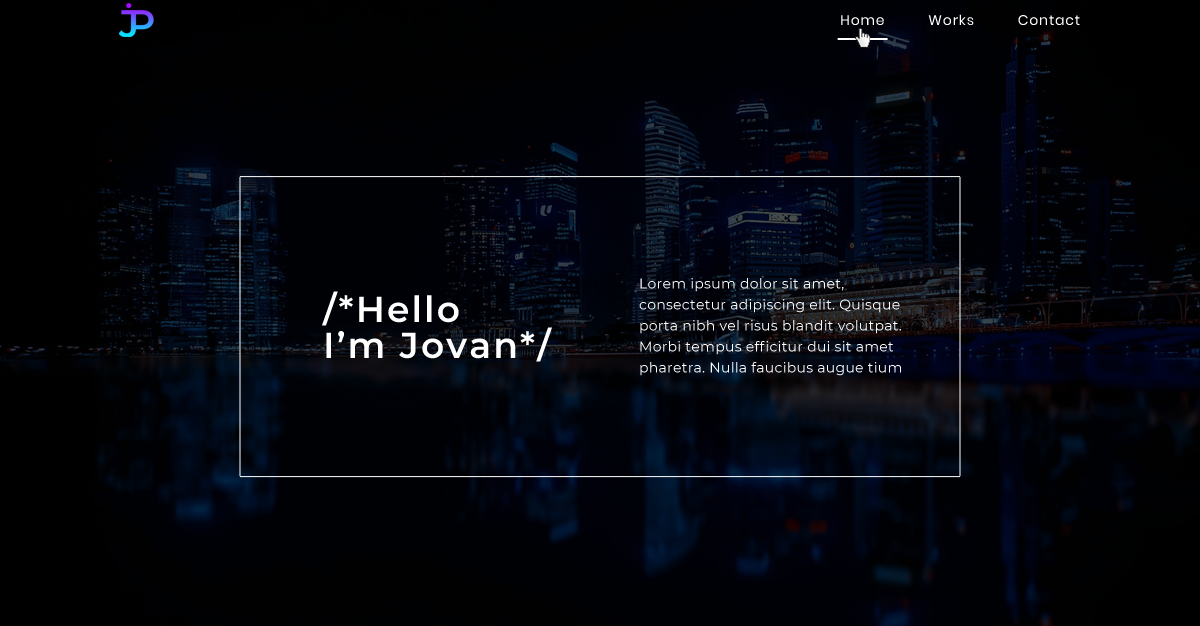
<style>
.page{position:relative;width:1200px;height:626px}
.page>*{position:absolute;margin:0}
.t1{font:14px "Poppins-Regular";letter-spacing:0.06em;color:#ffffff}
.t2{font:14px/21px "Montserrat-Regular";letter-spacing:0.02em;color:#ffffff}
.t3{font:36px/36px "Montserrat-SemiBold";letter-spacing:0.06em;color:#ffffff}
</style>
<div class="page">
<p class="t1" style="left:841px;top:14px;width:239px;height:11px">Home          Works          Contact</p>
<p class="t2" style="left:639px;top:278px;width:262px;height:98px">Lorem ipsum dolor sit amet, consectetur adipiscing elit. Quisque porta nibh vel risus blandit volutpat. Morbi tempus efficitur dui sit amet pharetra. Nulla faucibus augue tium</p>
<p class="t3" style="left:322px;top:291px;width:230px;height:71px">/*Hello <br>I’m Jovan*/</p>
</div>
